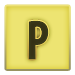
<style>
.page{position:relative;width:75px;height:75px;background:#ede472}
.page>*{position:absolute;margin:0}
.t1{font:56.9px "MyriadPro-BoldCond";color:#373618;scale:0.91 1}
</style>
<div class="page">
<p class="t1" style="left:28px;top:20px;width:21px;height:40px">P</p>
</div>
